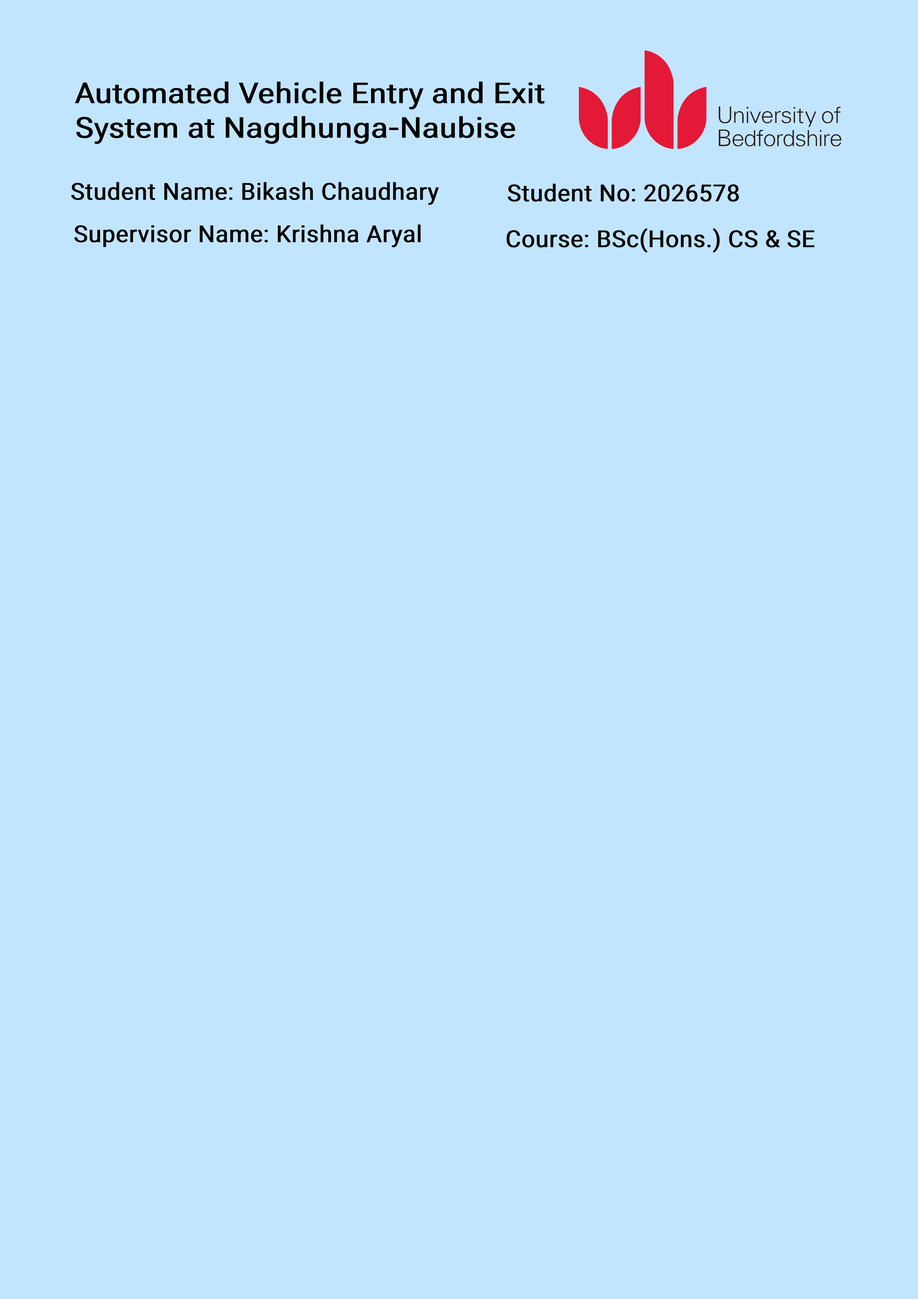
<style>
.page{position:relative;width:918px;height:1299px;background:#c2e5ff}
.page>*{position:absolute;margin:0}
.t1{font:28.8px "RobotoFlex-Regular";color:#000000;font-weight:bold;scale:1.06 1}
.t2{font:23.6px "Roboto-Regular";color:#000000;font-weight:bold}
</style>
<div class="page">
<p class="t1" style="left:75px;top:81px;width:470px;height:63px">Automated Vehicle Entry and Exit System at Nagdhunga-Naubise</p>
<p class="t2" style="left:71px;top:182px;width:368px;height:23px">Student Name: Bikash Chaudhary</p>
<p class="t2" style="left:508px;top:183px;width:231px;height:19px">Student No: 2026578</p>
<p class="t2" style="left:74px;top:224px;width:347px;height:23px">Supervisor Name: Krishna Aryal</p>
<p class="t2" style="left:507px;top:228px;width:308px;height:25px">Course: BSc(Hons.) CS &amp; SE</p>
</div>
